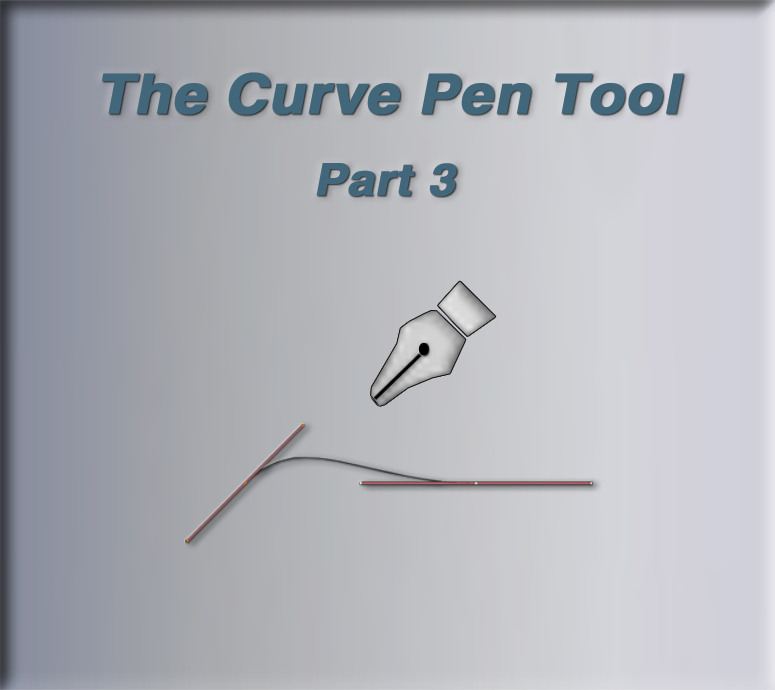
<style>
.page{position:relative;width:775px;height:690px}
.page>*{position:absolute;margin:0}
.t1{font:54.9px "HelveticaLTStd-Bold";color:#42667a;font-weight:bold;font-style:italic;scale:1.08 1}
.t2{font:44.6px "HelveticaLTStd-Bold";color:#42667a;font-weight:bold;font-style:italic;scale:1.08 1}
</style>
<div class="page">
<p class="t1" style="left:102px;top:72px;width:582px;height:43px">The Curve Pen Tool</p>
<p class="t2" style="left:316px;top:163px;width:141px;height:34px">Part 3</p>
</div>
